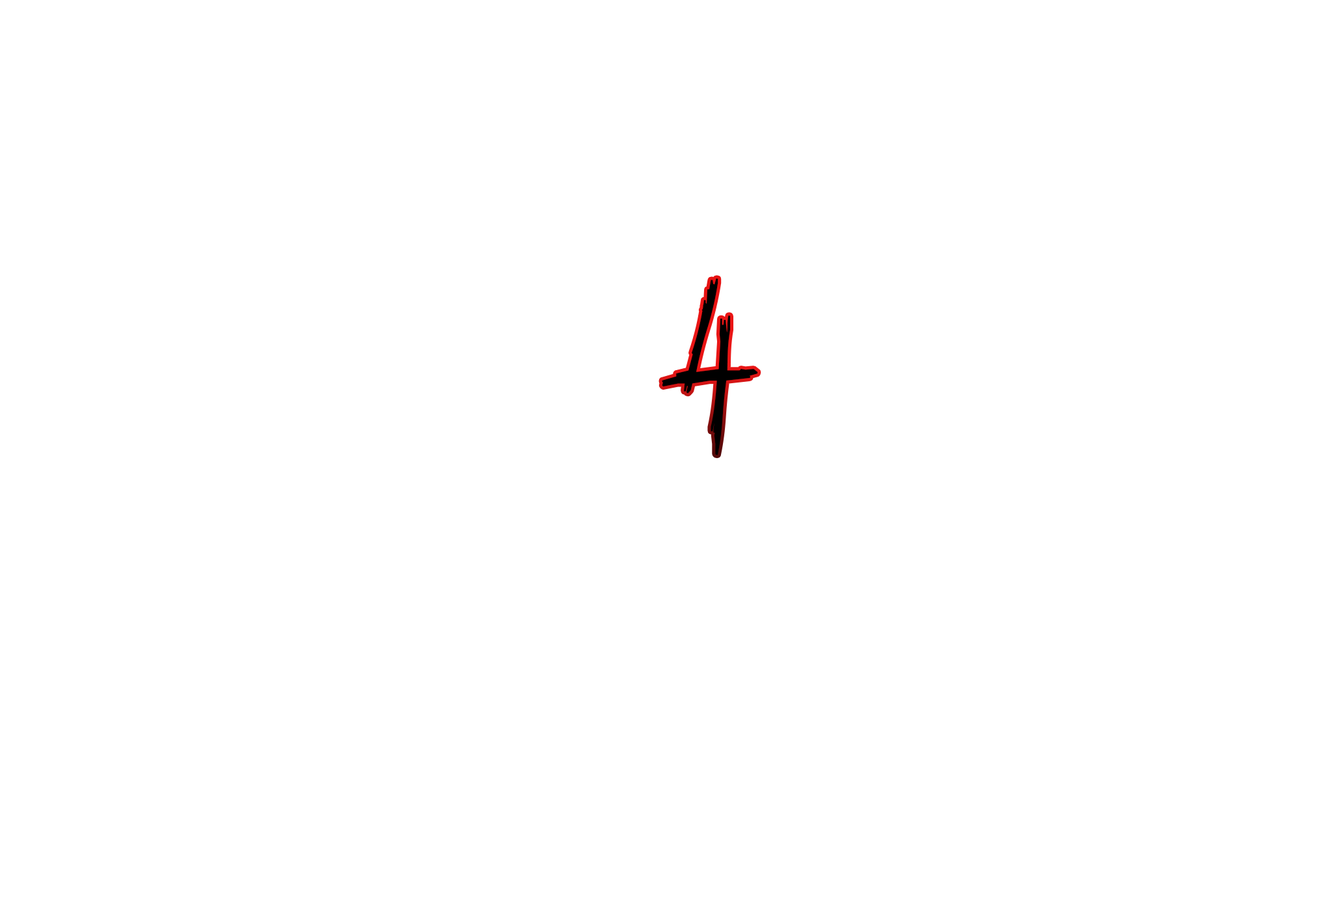
<style>
.page{position:relative;width:1328px;height:898px;background:#ffffff}
.page>*{position:absolute;margin:0}
.t1{font:199.3px "onryou";color:#000000;font-weight:bold}
</style>
<div class="page">
<p class="t1" style="left:662px;top:278px;width:96px;height:177px">4</p>
</div>
